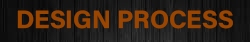
<style>
.page{position:relative;width:250px;height:42px}
.page>*{position:absolute;margin:0}
.t1{font:25px "AcuminConcept-Bold";color:#9a4500}
</style>
<div class="page">
<p class="t1" style="left:17px;top:10px;width:216px;height:19px">DESIGN PROCESS</p>
</div>
